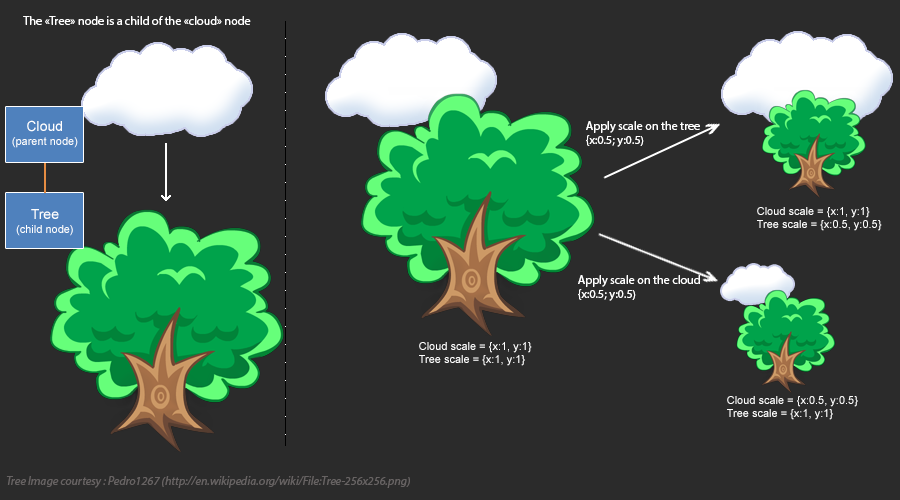
<style>
.page{position:relative;width:900px;height:500px;background:#2b2b2b}
.page>*{position:absolute;margin:0}
.t1{font:12px "MyriadPro-Regular";color:#ffffff}
.t2{font:11px "ArialMT";color:#ffffff}
.t3{font:14px "ArialMT";color:#ffffff}
.t4{font:12px "MyriadPro-It";color:#676363}
</style>
<div class="page">
<p class="t1" style="left:23px;top:16px;width:228px;height:9px">The «Tree» node is a child of the «cloud» node</p>
<p class="t2" style="left:12px;top:120px;width:66px;height:28px;text-align:center"><span class="t3">Cloud<br></span>(parent node)</p>
<p class="t1" style="left:586px;top:121px;width:114px;height:26px">Apply scale on the tree<br>{x:0.5; y:0.5)</p>
<p class="t2" style="left:16px;top:209px;width:57px;height:27px;text-align:center"><span class="t3">Tree<br></span>(child node)</p>
<p class="t2" style="left:757px;top:207px;width:125px;height:24px">Cloud scale = {x:1, y:1} <br>Tree scale = {x:0.5, y:0.5}</p>
<p class="t1" style="left:578px;top:275px;width:122px;height:26px">Apply scale on the cloud<br>{x:0.5; y:0.5)</p>
<p class="t2" style="left:419px;top:342px;width:113px;height:24px">Cloud scale = {x:1, y:1} <br>Tree scale = {x:1, y:1}</p>
<p class="t2" style="left:727px;top:396px;width:131px;height:24px">Cloud scale = {x:0.5, y:0.5}<br>Tree scale = {x:1, y:1}</p>
<p class="t4" style="left:6px;top:476px;width:404px;height:12px">Tree Image courtesy : Pedro1267 (http://en.wikipedia.org/wiki/File:Tree-256x256.png)</p>
</div>
